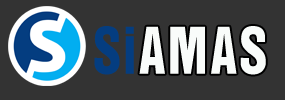
<style>
.page{position:relative;width:285px;height:100px;background:#333333}
.page>*{position:absolute;margin:0}
.t1{font:58.8px "HelveticaInseratLT-Roman";color:#043d80;scale:0.91 1}
.t2{font:58.8px "HelveticaInseratLT-Roman";color:#f9fcfa;scale:0.91 1}
</style>
<div class="page">
<p class="t1" style="left:94px;top:26px;width:40px;height:49px">Si</p>
<p class="t2" style="left:139px;top:26px;width:127px;height:49px">AMAS</p>
</div>
